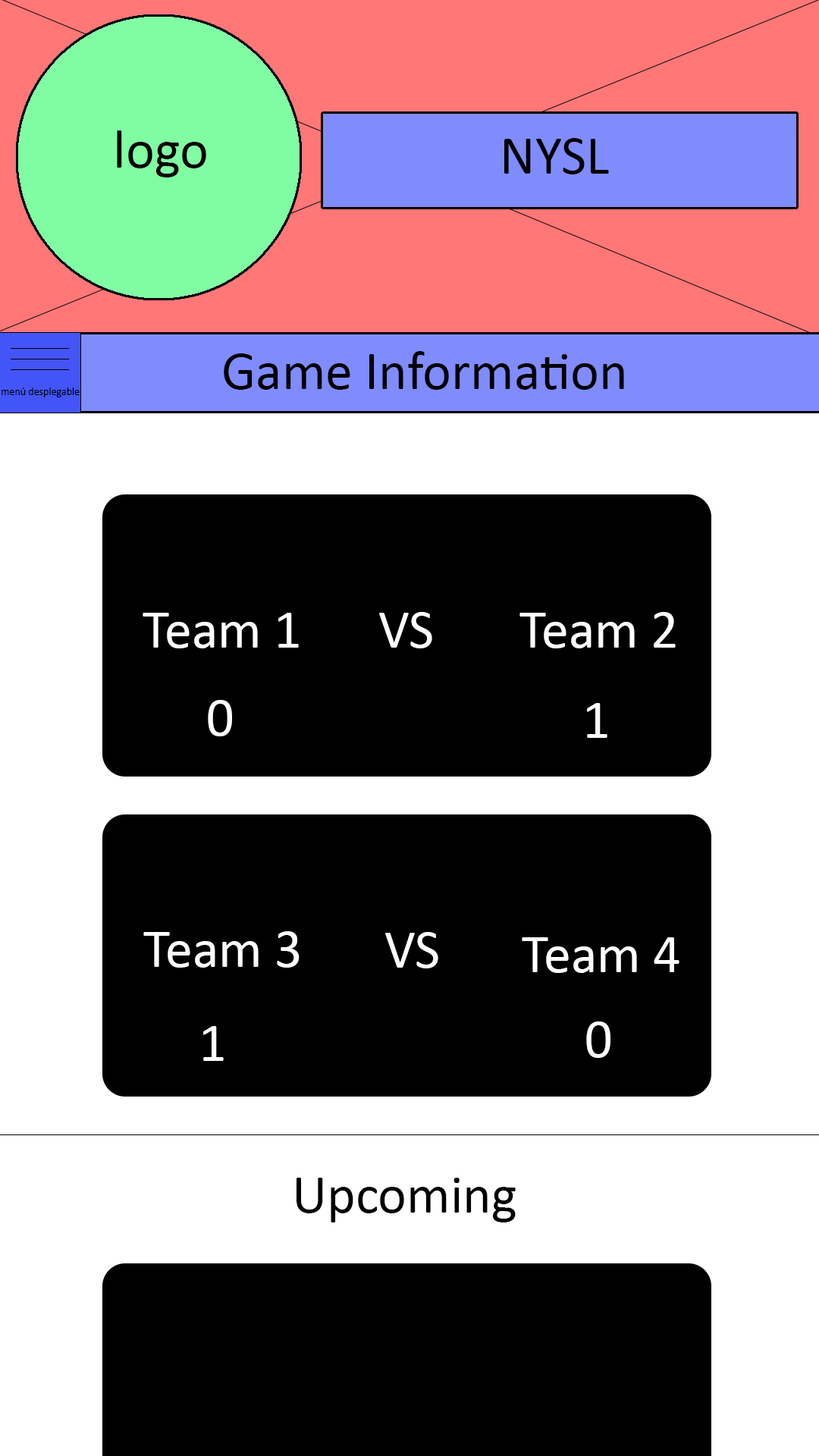
<style>
.page{position:relative;width:819px;height:1456px;background:#000000}
.page>*{position:absolute;margin:0}
.t1{font:54.6px "Calibri";color:#000000}
.t2{font:54.6px "Calibri";color:#ffffff}
</style>
<div class="page">
<p class="t1" style="left:224px;top:351px;width:400px;height:39px">Game Information</p>
<p class="t2" style="left:143px;top:613px;width:156px;height:35px">Team 1</p>
<p class="t2" style="left:379px;top:612px;width:53px;height:36px">VS</p>
<p class="t2" style="left:519px;top:612px;width:157px;height:36px">Team 2</p>
<p class="t2" style="left:208px;top:700px;width:24px;height:36px">0</p>
<p class="t2" style="left:587px;top:703px;width:20px;height:35px">1</p>
<p class="t2" style="left:143px;top:931px;width:157px;height:37px">Team 3</p>
<p class="t2" style="left:385px;top:932px;width:53px;height:36px">VS</p>
<p class="t2" style="left:522px;top:937px;width:157px;height:36px">Team 4</p>
<p class="t2" style="left:586px;top:1021px;width:24px;height:37px">0</p>
<p class="t2" style="left:203px;top:1026px;width:21px;height:35px">1</p>
<p class="t1" style="left:297px;top:1178px;width:219px;height:44px">Upcoming</p>
</div>
